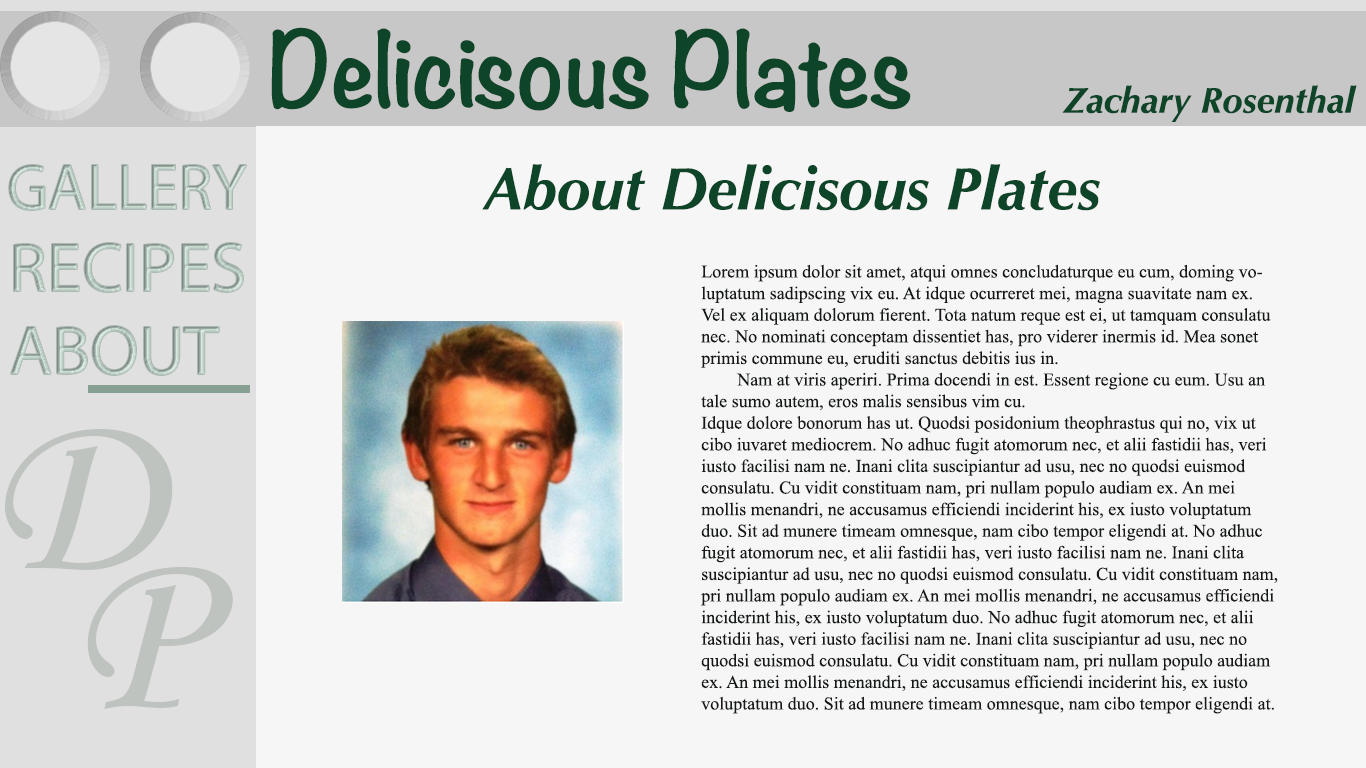
<style>
.page{position:relative;width:1366px;height:768px;background:#f6f6f6}
.page>*{position:absolute;margin:0}
.t1{font:90.8px "Noteworthy-Bold";color:#0e4428}
.t2{font:36px "Optima-BoldItalic";color:#0e4428}
.t3{font:63.5px "MyriadPro-Regular"}
.t4{font:60px "Optima-BoldItalic";color:#0e4428}
.t5{font:70.3px "MyriadPro-Regular"}
.t6{font:18px "TimesNewRomanPSMT";color:#141916}
.t7{font:236.7px "MonotypeCorsiva";color:#bfc3c0;scale:1.04 1}
</style>
<div class="page">
<p class="t1" style="left:271px;top:27px;width:640px;height:85px">Delicisous Plates</p>
<p class="t2" style="left:1062px;top:85px;width:295px;height:37px">Zachary Rosenthal</p>
<p class="t3" style="left:9px;top:165px;width:238px;height:45px">GALLERY</p>
<p class="t4" style="left:482px;top:164px;width:618px;height:47px">About Delicisous Plates</p>
<p class="t5" style="left:14px;top:243px;width:229px;height:49px">RECIPES</p>
<p class="t6" style="left:701px;top:264px;width:577px;height:450px">Lorem ipsum dolor sit amet, atqui omnes concludaturque eu cum, doming voluptatum sadipscing vix eu. At idque ocurreret mei, magna suavitate nam ex. Vel ex aliquam dolorum fierent. Tota natum reque est ei, ut tamquam consulatu nec. No nominati conceptam dissentiet has, pro viderer inermis id. Mea sonet primis commune eu, eruditi sanctus debitis ius in.<br> Nam at viris aperiri. Prima docendi in est. Essent regione cu eum. Usu an tale sumo autem, eros malis sensibus vim cu.<br>Idque dolore bonorum has ut. Quodsi posidonium theophrastus qui no, vix ut cibo iuvaret mediocrem. No adhuc fugit atomorum nec, et alii fastidii has, veri iusto facilisi nam ne. Inani clita suscipiantur ad usu, nec no quodsi euismod consulatu. Cu vidit constituam nam, pri nullam populo audiam ex. An mei mollis menandri, ne accusamus efficiendi inciderint his, ex iusto voluptatum duo. Sit ad munere timeam omnesque, nam cibo tempor eligendi at. No adhuc fugit atomorum nec, et alii fastidii has, veri iusto facilisi nam ne. Inani clita suscipiantur ad usu, nec no quodsi euismod consulatu. Cu vidit constituam nam, pri nullam populo audiam ex. An mei mollis menandri, ne accusamus efficiendi inciderint his, ex iusto voluptatum duo. No adhuc fugit atomorum nec, et alii fastidii has, veri iusto facilisi nam ne. Inani clita suscipiantur ad usu, nec no quodsi euismod consulatu. Cu vidit constituam nam, pri nullam populo audiam ex. An mei mollis menandri, ne accusamus efficiendi inciderint his, ex iusto voluptatum duo. Sit ad munere timeam omnesque, nam cibo tempor eligendi at.</p>
<p class="t5" style="left:11px;top:326px;width:208px;height:49px">ABOUT</p>
<p class="t7" style="left:4px;top:429px;width:169px;height:141px">D</p>
<p class="t7" style="left:87px;top:567px;width:146px;height:142px">P</p>
</div>
